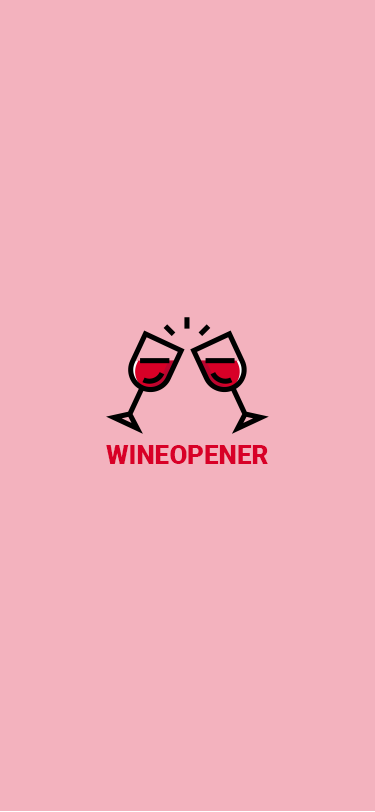
<style>
.page{position:relative;width:375px;height:812px;background:#f3b2be}
.page>*{position:absolute;margin:0}
.t1{font:26px "Roboto-Black";color:#d80027}
</style>
<div class="page">
<p class="t1" style="left:106px;top:445px;width:162px;height:19px">WINEOPENER</p>
</div>
